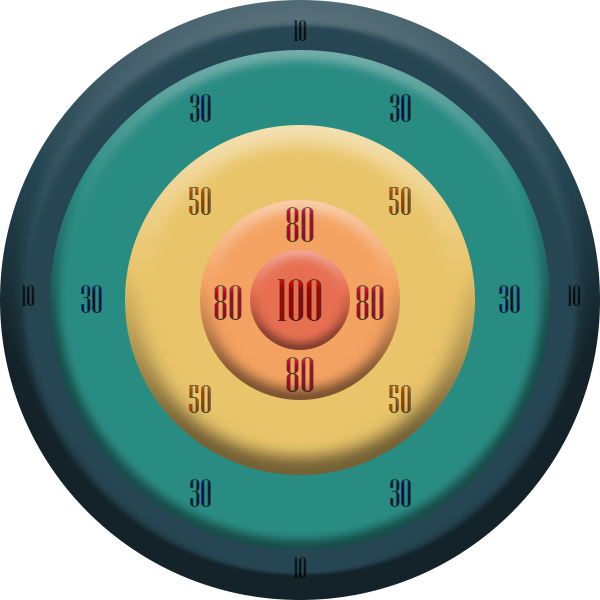
<style>
.page{position:relative;width:600px;height:600px;background:#ffffff}
.page>*{position:absolute;margin:0}
.t1{font:30px "NiagaraSolid-Reg";color:#0c161a}
.t2{font:40px "NiagaraSolid-Reg";color:#081c4a}
.t3{font:40px "NiagaraSolid-Reg"}
.t4{font:50px "NiagaraSolid-Reg"}
.t5{font:60px "NiagaraSolid-Reg"}
.t6{font:30px "NiagaraSolid-Reg";color:#0b1519}
.t7{font:30px "NiagaraSolid-Reg";color:#0b1418}
</style>
<div class="page">
<p class="t1" style="left:294px;top:20px;width:13px;height:21px">10</p>
<p class="t2" style="left:190px;top:94px;width:21px;height:28px">30</p>
<p class="t2" style="left:390px;top:94px;width:21px;height:28px">30</p>
<p class="t3" style="left:189px;top:187px;width:22px;height:28px">50</p>
<p class="t3" style="left:389px;top:187px;width:22px;height:28px">50</p>
<p class="t4" style="left:286px;top:207px;width:28px;height:35px">80</p>
<p class="t5" style="left:278px;top:279px;width:44px;height:42px">100</p>
<p class="t6" style="left:22px;top:285px;width:13px;height:21px">10</p>
<p class="t2" style="left:81px;top:285px;width:21px;height:28px">30</p>
<p class="t4" style="left:214px;top:285px;width:28px;height:35px">80</p>
<p class="t4" style="left:356px;top:285px;width:28px;height:35px">80</p>
<p class="t2" style="left:499px;top:285px;width:21px;height:28px">30</p>
<p class="t7" style="left:568px;top:285px;width:13px;height:21px">10</p>
<p class="t4" style="left:286px;top:357px;width:28px;height:35px">80</p>
<p class="t3" style="left:189px;top:385px;width:22px;height:28px">50</p>
<p class="t3" style="left:389px;top:385px;width:22px;height:28px">50</p>
<p class="t2" style="left:190px;top:479px;width:21px;height:28px">30</p>
<p class="t2" style="left:390px;top:479px;width:21px;height:28px">30</p>
<p class="t7" style="left:294px;top:557px;width:13px;height:21px">10</p>
</div>
